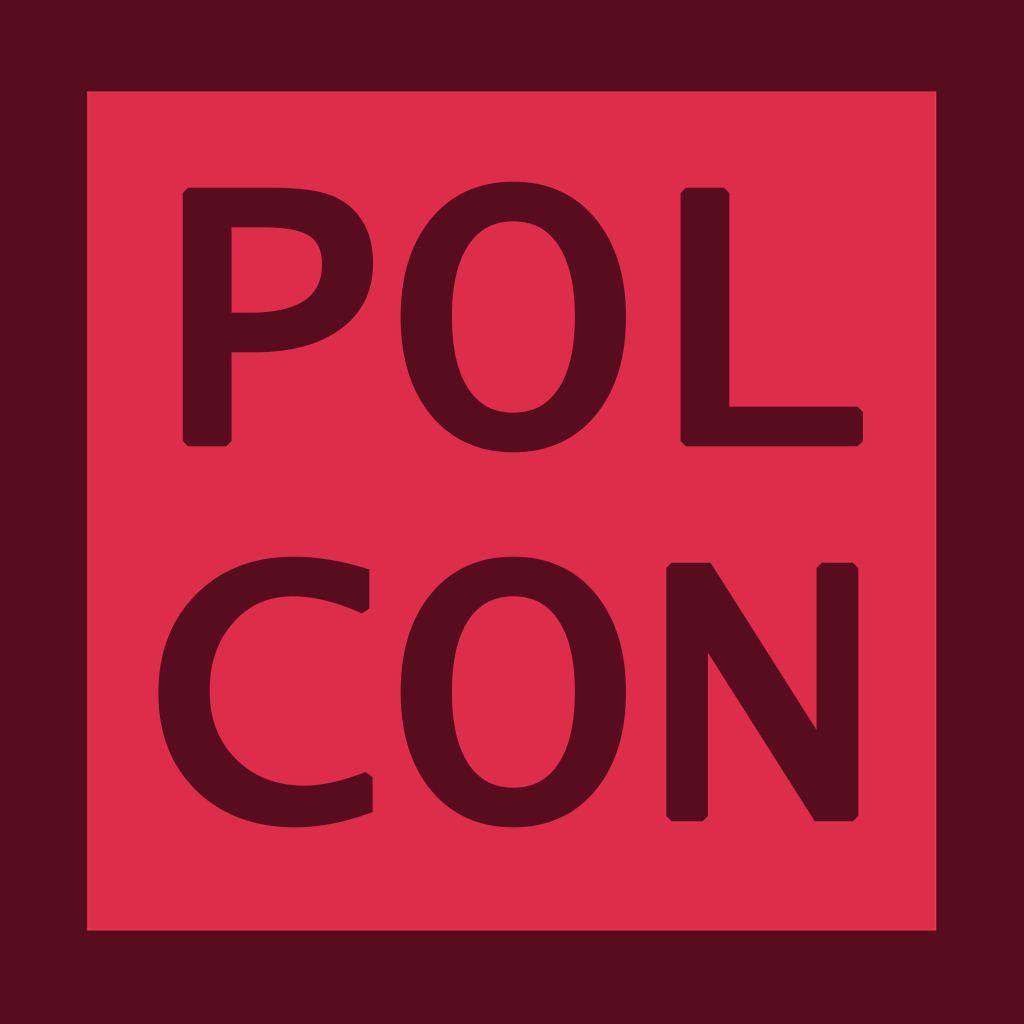
<style>
.page{position:relative;width:1024px;height:1024px;background:#dd2d4a}
.page>*{position:absolute;margin:0}
.t1{font:395.8px/375px "LucidaConsole";color:#580d1e;font-weight:bold}
</style>
<div class="page">
<p class="t1" style="left:158px;top:181px;width:705px;height:647px">POL<br>CON</p>
</div>
